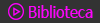
<style>
.page{position:relative;width:100px;height:23px;background:#333333}
.page>*{position:absolute;margin:0}
.t1{font:15.6px "Tahoma";color:#ff00ff}
</style>
<div class="page">
<p class="t1" style="left:29px;top:5px;width:64px;height:13px">Biblioteca</p>
</div>
